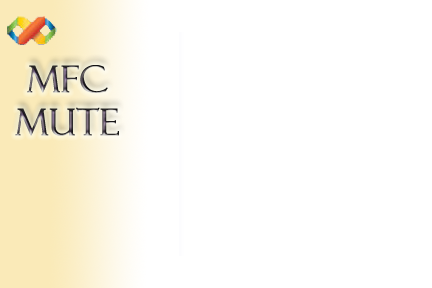
<style>
.page{position:relative;width:432px;height:288px;background:#ffffff}
.page>*{position:absolute;margin:0}
.t1{font:36px "FelixTitlingMT";font-weight:bold}
</style>
<div class="page">
<p class="t1" style="left:15px;top:65px;width:104px;height:71px;text-align:center">MFC<br>MUTE</p>
</div>
